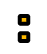
<style>
.page{position:relative;width:47px;height:54px;background:#ffffff}
.page>*{position:absolute;margin:0}
.t1{font:49.8px "LithosPro-Black"}
</style>
<div class="page">
<p class="t1" style="left:19px;top:16px;width:10px;height:25px">:</p>
</div>
